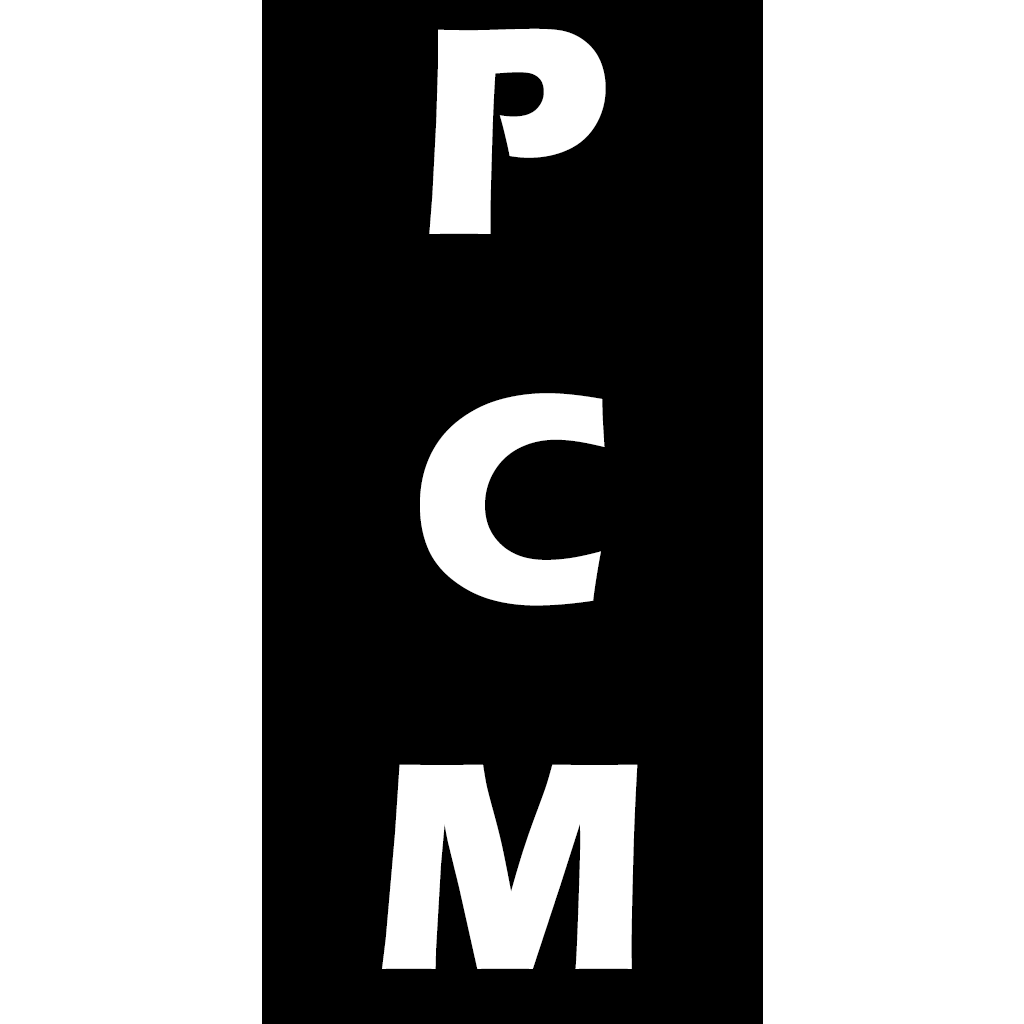
<style>
.page{position:relative;width:1024px;height:1024px;background:#ffffff}
.page>*{position:absolute;margin:0}
.t1{font:306.2px "ErasITC-Bold";letter-spacing:0.002em;color:#ffffff}
</style>
<div class="page">
<p class="t1" style="left:382px;top:28px;width:256px;height:941px;text-align:center">P<br>C<br>M</p>
</div>
